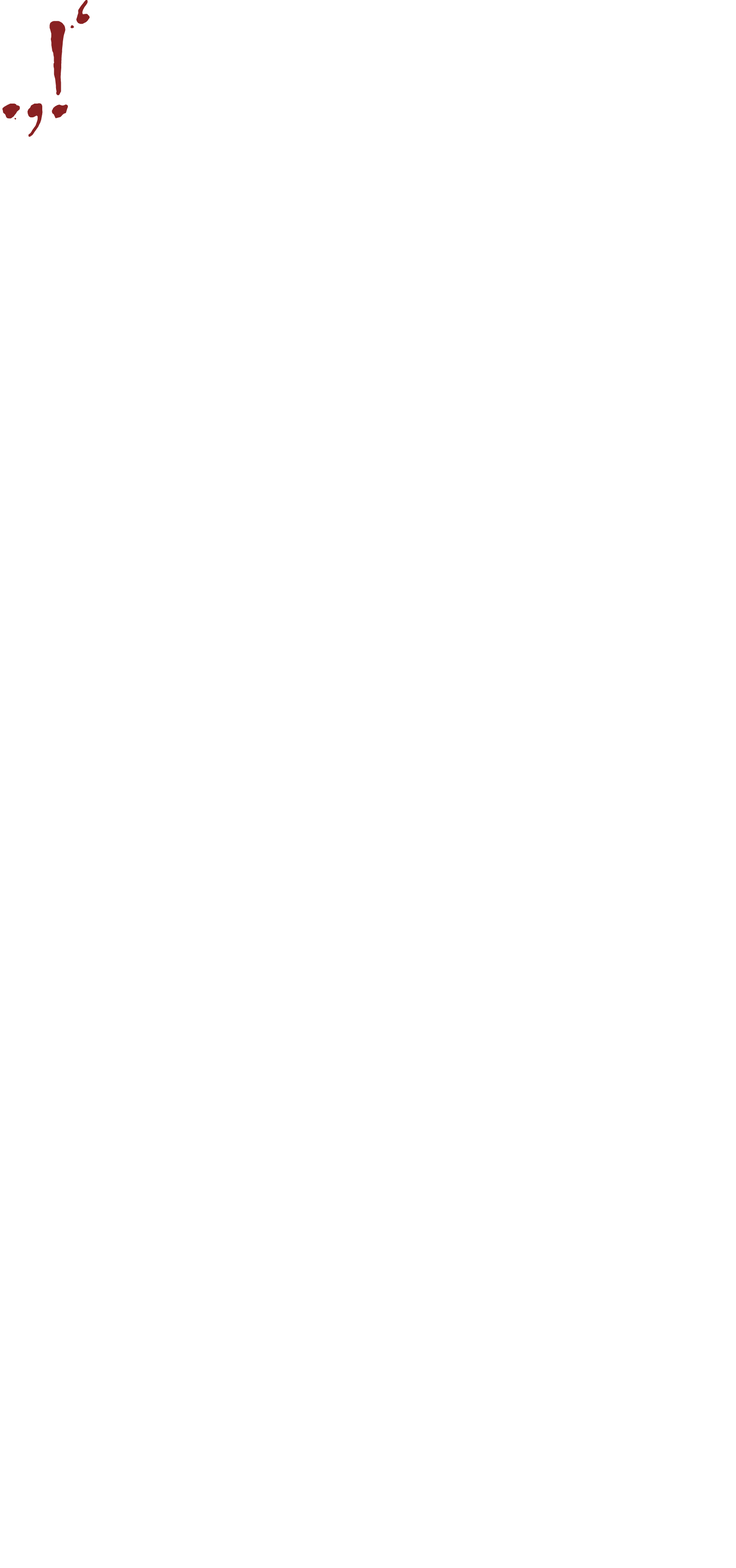
<style>
.page{position:relative;width:736px;height:1568px;background:#ffffff}
.page>*{position:absolute;margin:0}
.t1{font:142.5px "Chiller-Regular";letter-spacing:-0.025em;color:#892122}
</style>
<div class="page">
<p class="t1" style="left:70px;top:0px;width:20px;height:29px">‘</p>
<p class="t1" style="left:49px;top:21px;width:19px;height:97px">!</p>
<p class="t1" style="left:2px;top:104px;width:18px;height:16px">.</p>
<p class="t1" style="left:28px;top:103px;width:15px;height:34px">,</p>
</div>
